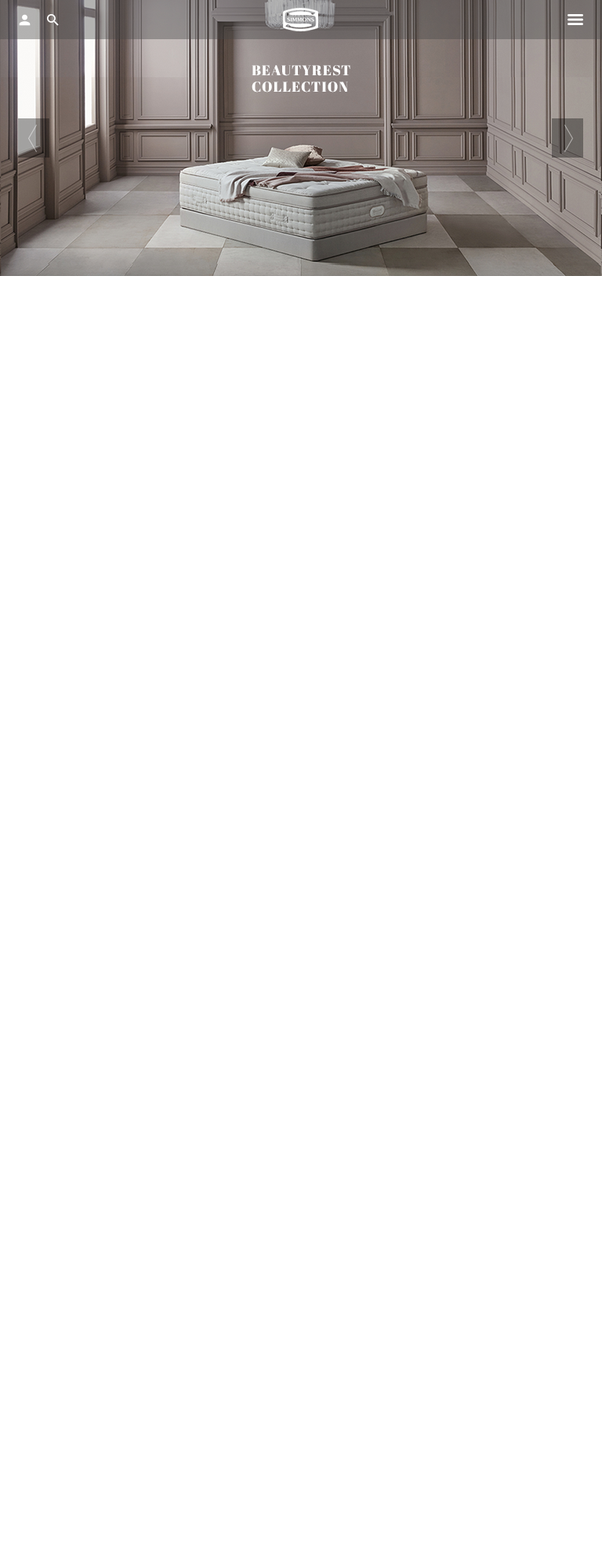
<style>
.page{position:relative;width:602px;height:1568px;background:#ffffff}
.page>*{position:absolute;margin:0}
.t1{font:14.1px "AbrilFatface-Regular";letter-spacing:0.06em;color:#ffffff}
</style>
<div class="page">
<p class="t1" style="left:252px;top:65px;width:98px;height:28px">BEAUTYREST<br>COLLECTION</p>
</div>
